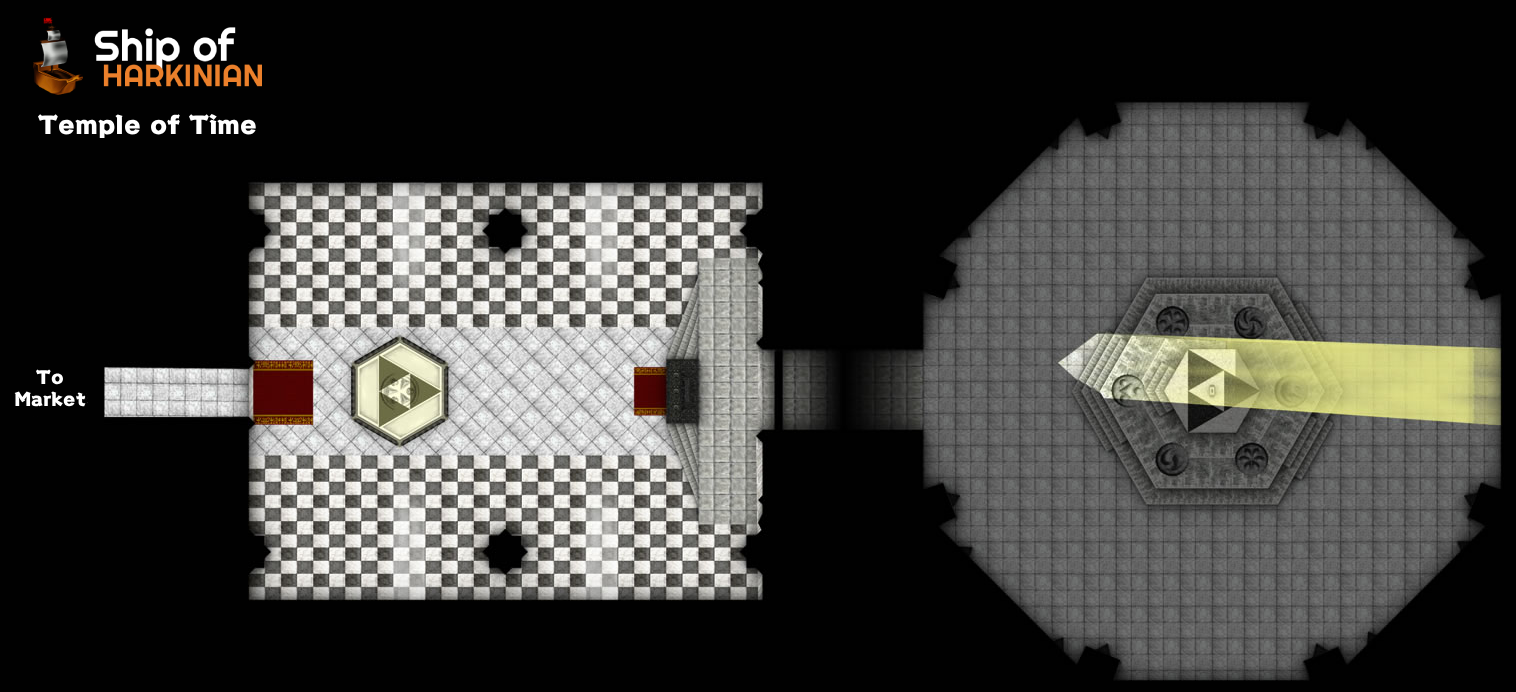
<style>
.page{position:relative;width:1516px;height:692px;background:#010101}
.page>*{position:absolute;margin:0}
.t1{font:25.3px "KokinEdoStd-EB";color:#ffffff}
.t2{font:18.7px "KokinEdoStd-EB";color:#ffffff}
</style>
<div class="page">
<p class="t1" style="left:38px;top:114px;width:218px;height:24px">Temple of Time</p>
<p class="t2" style="left:14px;top:369px;width:72px;height:38px;text-align:center">To<br>Market</p>
</div>
